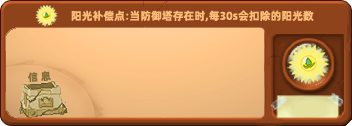
<style>
.page{position:relative;width:352px;height:126px}
.page>*{position:absolute;margin:0}
.t1{font:11px "AlibabaPuHuiTiB";color:#fcbd78}
.t2{font:10.4px "AlibabaPuHuiTiB";color:#806d39}
</style>
<div class="page">
<p class="t1" style="left:71px;top:10px;width:243px;height:12px">阳光补偿点:当防御塔存在时,每30s会扣除的阳光数</p>
<p class="t2" style="left:28px;top:71px;width:23px;height:12px;rotate:-4deg">信 息</p>
</div>
